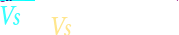
<style>
.page{position:relative;width:179px;height:35px;background:#ffffff}
.page>*{position:absolute;margin:0}
.t1{font:30px "MrsEavesItalic";color:#37ffff}
</style>
<div class="page">
<p class="t1" style="left:0px;top:6px;width:21px;height:19px">Vs</p>
</div>
